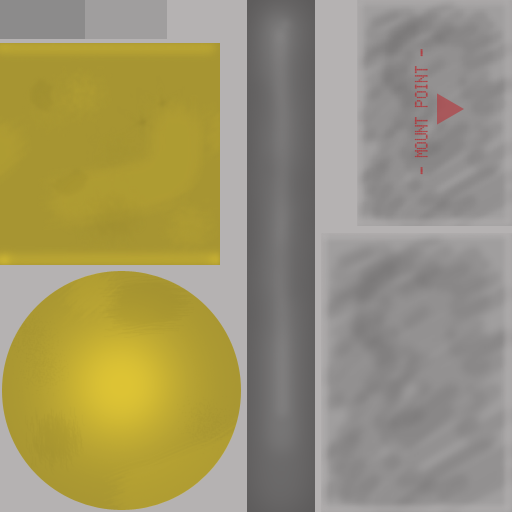
<style>
.page{position:relative;width:512px;height:512px}
.page>*{position:absolute;margin:0}
.t1{font:15.6px "LCD5x8H";color:#ae4044;scale:0.77 1}
</style>
<div class="page">
<p class="t1" style="left:414px;top:49px;width:14px;height:126px;rotate:-90deg">- MOUNT POINT -</p>
</div>
